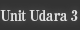
<style>
.page{position:relative;width:80px;height:30px}
.page>*{position:absolute;margin:0}
.t1{font:15px "RyuminPro-ExBold";letter-spacing:-0.04em;color:#dfdfdf;scale:0.9 1}
</style>
<div class="page">
<p class="t1" style="left:0px;top:10px;width:78px;height:11px">Unit Udara 3</p>
</div>
